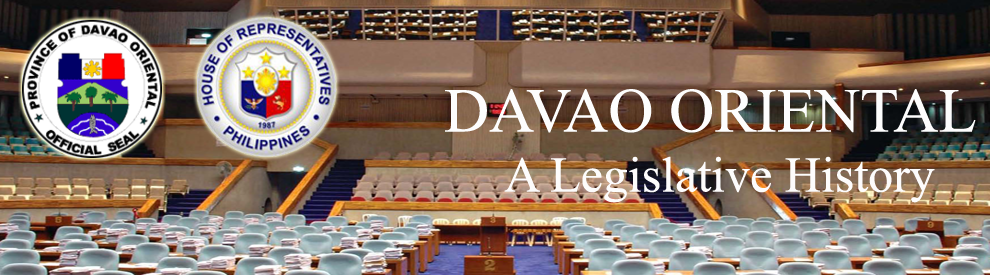
<style>
.page{position:relative;width:990px;height:275px}
.page>*{position:absolute;margin:0}
.t1{font:50px "TimesNewRomanPSMT";color:#fdfcfc}
.t2{font:62.5px "TimesNewRomanPSMT";color:#fdfdfd}
</style>
<div class="page">
<p class="t1" style="left:445px;top:89px;width:531px;height:114px;text-align:center"><span class="t2">DAVAO ORIENTAL<br></span>A Legislative History</p>
</div>
